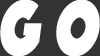
<style>
.page{position:relative;width:100px;height:56px;background:#ffffff}
.page>*{position:absolute;margin:0}
.t1{font:79.5px "Phosphate-Solid";color:#ffffff;font-weight:bold;font-style:italic;scale:0.74 1}
</style>
<div class="page">
<p class="t1" style="left:0px;top:0px;width:100px;height:57px">g o</p>
</div>
